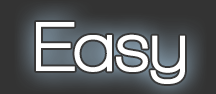
<style>
.page{position:relative;width:216px;height:94px;background:#333333}
.page>*{position:absolute;margin:0}
.t1{font:72px "WalkwayUltraBold";color:#ffffff}
</style>
<div class="page">
<p class="t1" style="left:36px;top:22px;width:149px;height:62px">Easy</p>
</div>
